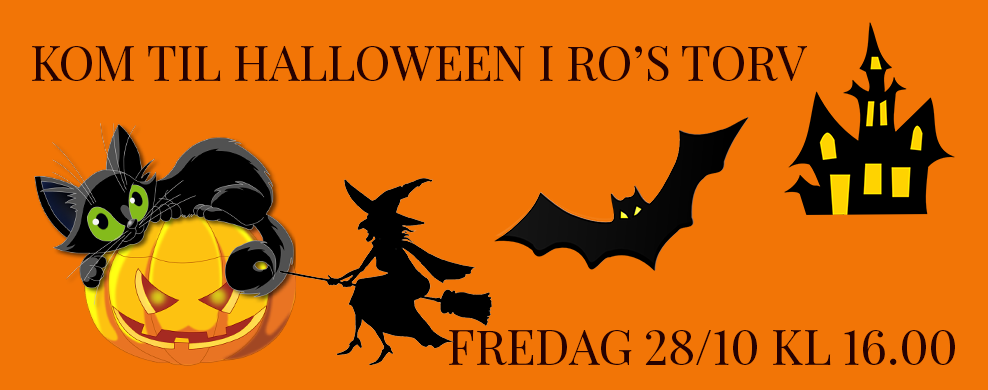
<style>
.page{position:relative;width:988px;height:390px;background:#f27506}
.page>*{position:absolute;margin:0}
.t1{font:48px "PlayfairDisplay-Regular";color:#260101;text-transform:uppercase}
</style>
<div class="page">
<p class="t1" style="left:32px;top:46px;width:775px;height:35px">Kom til Halloween i RO’s Torv</p>
<p class="t1" style="left:449px;top:330px;width:506px;height:35px">Fredag 28/10 kl 16.00</p>
</div>
